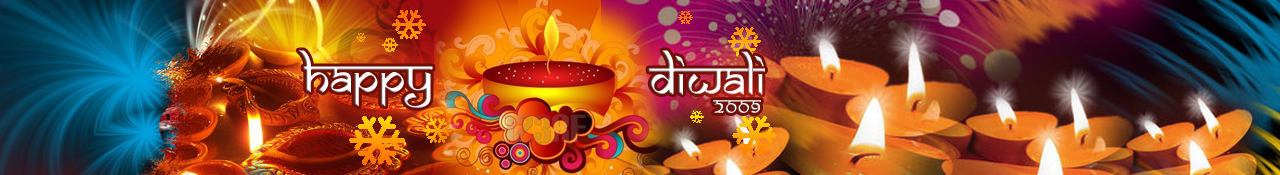
<style>
.page{position:relative;width:1280px;height:175px}
.page>*{position:absolute;margin:0}
.t1{font:48px "SamarkanNormal";letter-spacing:0.005em;color:#ffffff}
.t2{font:48px "SamarkanNormal";letter-spacing:0.005em}
.t3{font:24px "SamarkanNormal";letter-spacing:0.005em}
</style>
<div class="page">
<p class="t1" style="left:298px;top:50px;width:135px;height:58px">Happy</p>
<p class="t2" style="left:648px;top:50px;width:117px;height:45px">Diwali</p>
<p class="t3" style="left:713px;top:100px;width:48px;height:13px">2009</p>
</div>
